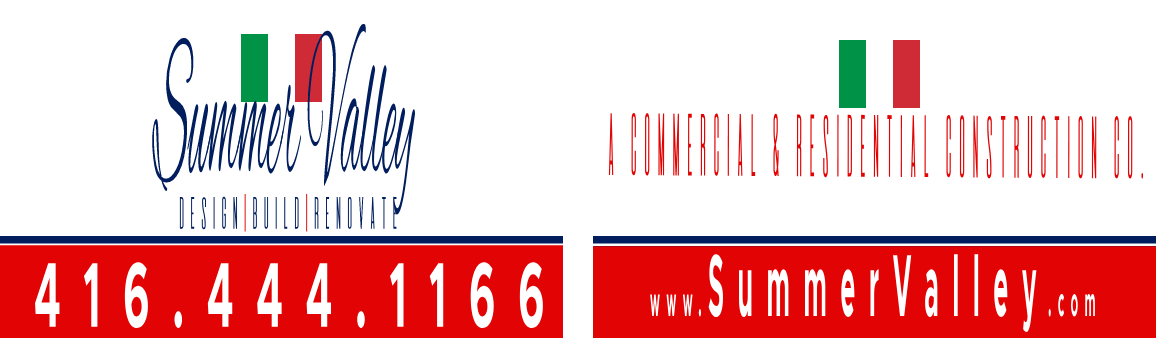
<style>
.page{position:relative;width:1156px;height:338px;background:#ffffff}
.page>*{position:absolute;margin:0}
.t1{font:212.6px "AlexBrush-Regular";color:#001e5d;scale:0.22 1}
.t2{font:77.1px "DeValencia-Regular";color:#e20404;scale:0.3 1}
.t3{font:39.6px "DeValencia-Regular";color:#001e5d;scale:0.48 1}
.t4{font:39.6px "DeValencia-Regular";color:#e20404;scale:0.48 1}
.t5{font:88.4px "Metropolis-Bold";letter-spacing:0.542em;color:#ffffff;scale:0.28 1}
.t6{font:41.8px "Metropolis-Bold";letter-spacing:0.542em;color:#ffffff;scale:0.28 1}
.t7{font:92.6px "Metropolis-Bold";letter-spacing:0.542em;color:#ffffff;scale:0.45 1}
</style>
<div class="page">
<p class="t1" style="left:152px;top:23px;width:263px;height:192px">Summer Valley</p>
<p class="t2" style="left:608px;top:112px;width:536px;height:67px">A Commercial &amp; Residential Construction c0.</p>
<p class="t3" style="left:179px;top:194px;width:218px;height:38px">Design<span class="t4">|</span>Build<span class="t4">|</span>Renovate</p>
<p class="t5" style="left:650px;top:254px;width:445px;height:78px"><span class="t6">www.</span>SummerValley<span class="t6">.com</span></p>
<p class="t7" style="left:35px;top:262px;width:508px;height:66px">416.444.1166</p>
</div>
